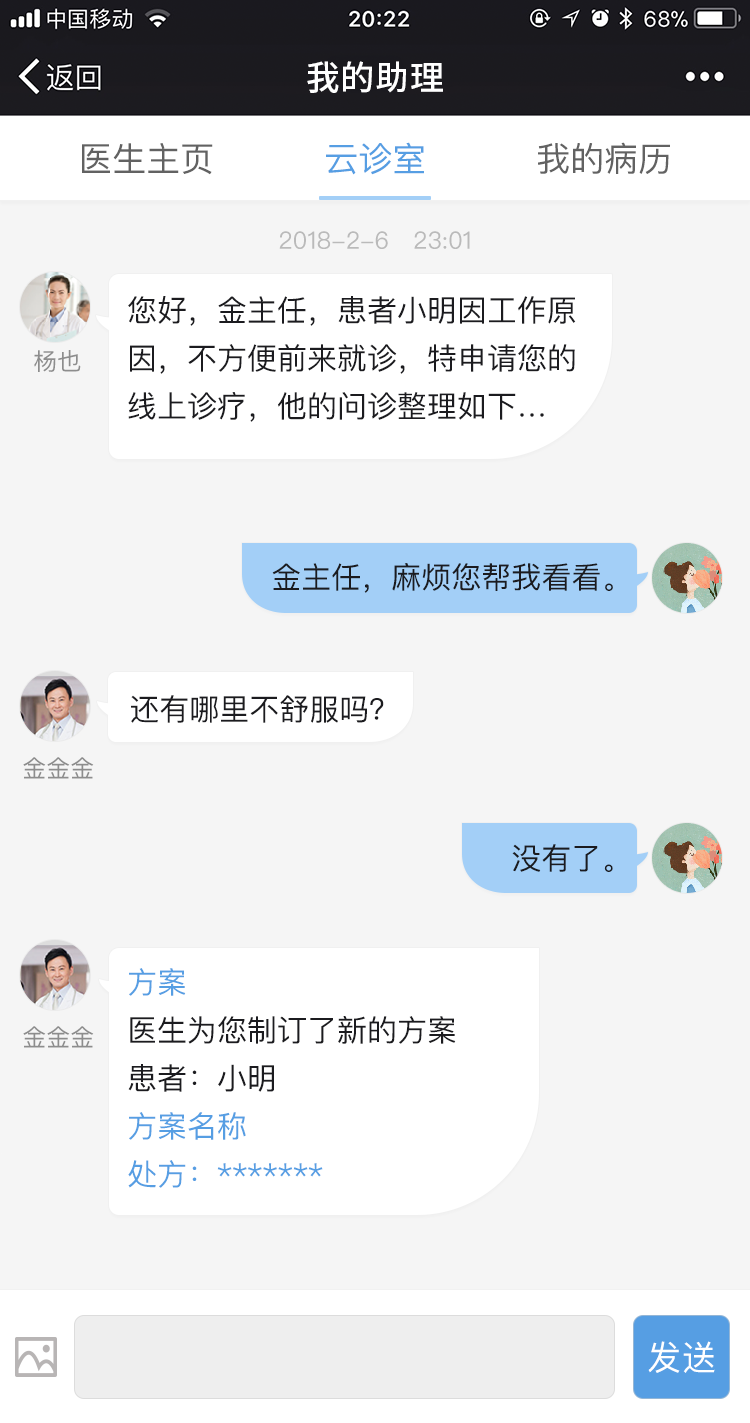
<style>
.page{position:relative;width:750px;height:1423px;background:#f5f5f5}
.page>*{position:absolute;margin:0}
.t1{font:34px "SourceHanSansCN-Medium";letter-spacing:0.02em;color:#ffffff}
.t2{font:34px "PingFangSC-Regular";color:#626262}
.t3{font:34px "PingFangSC-Regular";color:#569ee3}
.t4{font:24px "PingFangSC-Regular";color:#bababa}
.t5{font:30px/48px "PingFangSC-Regular";color:#1b1b1f}
.t6{font:24px "PingFangSC-Regular";color:#8d8d8d}
.t7{font:30px "PingFangSC-Regular";color:#1b1b1f}
.t8{font:30px/48px "PingFangSC-Regular";color:#569ee3}
.t9{font:34px "PingFangSC-Regular";letter-spacing:0.02em;color:#ffffff}
</style>
<div class="page">
<p class="t1" style="left:307px;top:61px;width:136px;height:32px">我的助理</p>
<p class="t2" style="left:82px;top:143px;width:131px;height:32px">医生主页</p>
<p class="t3" style="left:326px;top:142px;width:98px;height:33px">云诊室</p>
<p class="t2" style="left:538px;top:142px;width:132px;height:32px">我的病历</p>
<p class="t4" style="left:279px;top:231px;width:191px;height:18px">2018-2-6   23:01</p>
<p class="t5" style="left:128px;top:296px;width:448px;height:126px">您好，金主任，患者小明因工作原因，不方便前来就诊，特申请您的线上诊疗，他的问诊整理如下…</p>
<p class="t6" style="left:34px;top:350px;width:47px;height:22px">杨也</p>
<p class="t7" style="left:272px;top:563px;width:341px;height:30px">金主任，麻烦您帮我看看。</p>
<p class="t7" style="left:131px;top:695px;width:253px;height:28px">还有哪里不舒服吗？</p>
<p class="t6" style="left:23px;top:757px;width:71px;height:22px">金金金</p>
<p class="t7" style="left:512px;top:844px;width:101px;height:28px">没有了。</p>
<p class="t5" style="left:128px;top:968px;width:328px;height:220px"><span class="t8">方案<br></span>医生为您制订了新的方案<br>患者：小明<br><span class="t8">方案名称<br>处方：*******</span></p>
<p class="t6" style="left:23px;top:1026px;width:71px;height:22px">金金金</p>
<p class="t9" style="left:648px;top:1341px;width:67px;height:32px">发送</p>
</div>
